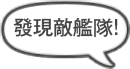
<style>
.page{position:relative;width:130px;height:69px;background:#ffffff}
.page>*{position:absolute;margin:0}
.t1{font:20px "GothicMB101Pr6N-Medium";color:#464545}
</style>
<div class="page">
<p class="t1" style="left:13px;top:17px;width:105px;height:20px">發現敵艦隊!</p>
</div>
